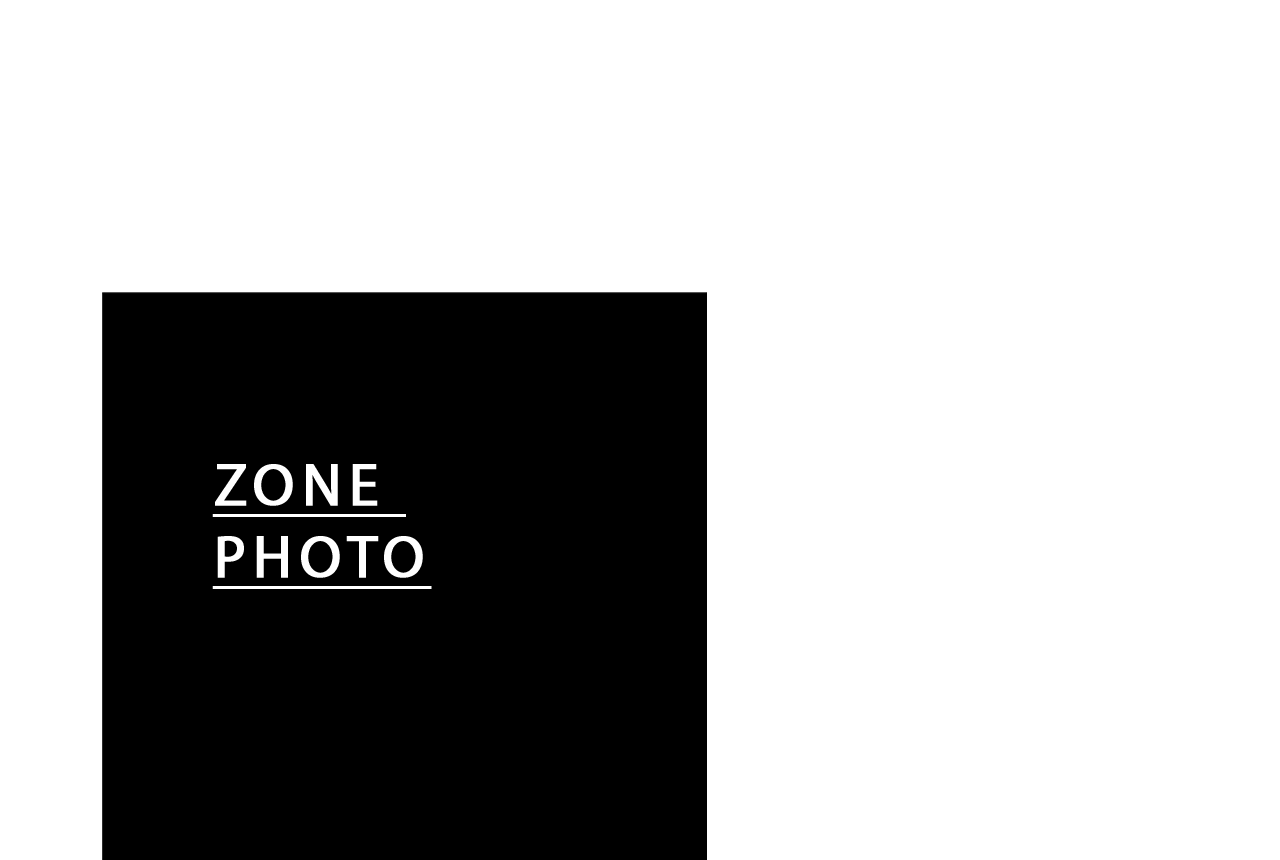
<style>
.page{position:relative;width:1280px;height:860px;background:#ffffff}
.page>*{position:absolute;margin:0}
.t1{font:60px "MyriadPro-Regular";letter-spacing:0.1em;color:#ffffff;font-weight:bold;text-decoration:underline}
</style>
<div class="page">
<p class="t1" style="left:212px;top:464px;width:220px;height:125px">ZONE <br>PHOTO</p>
</div>
